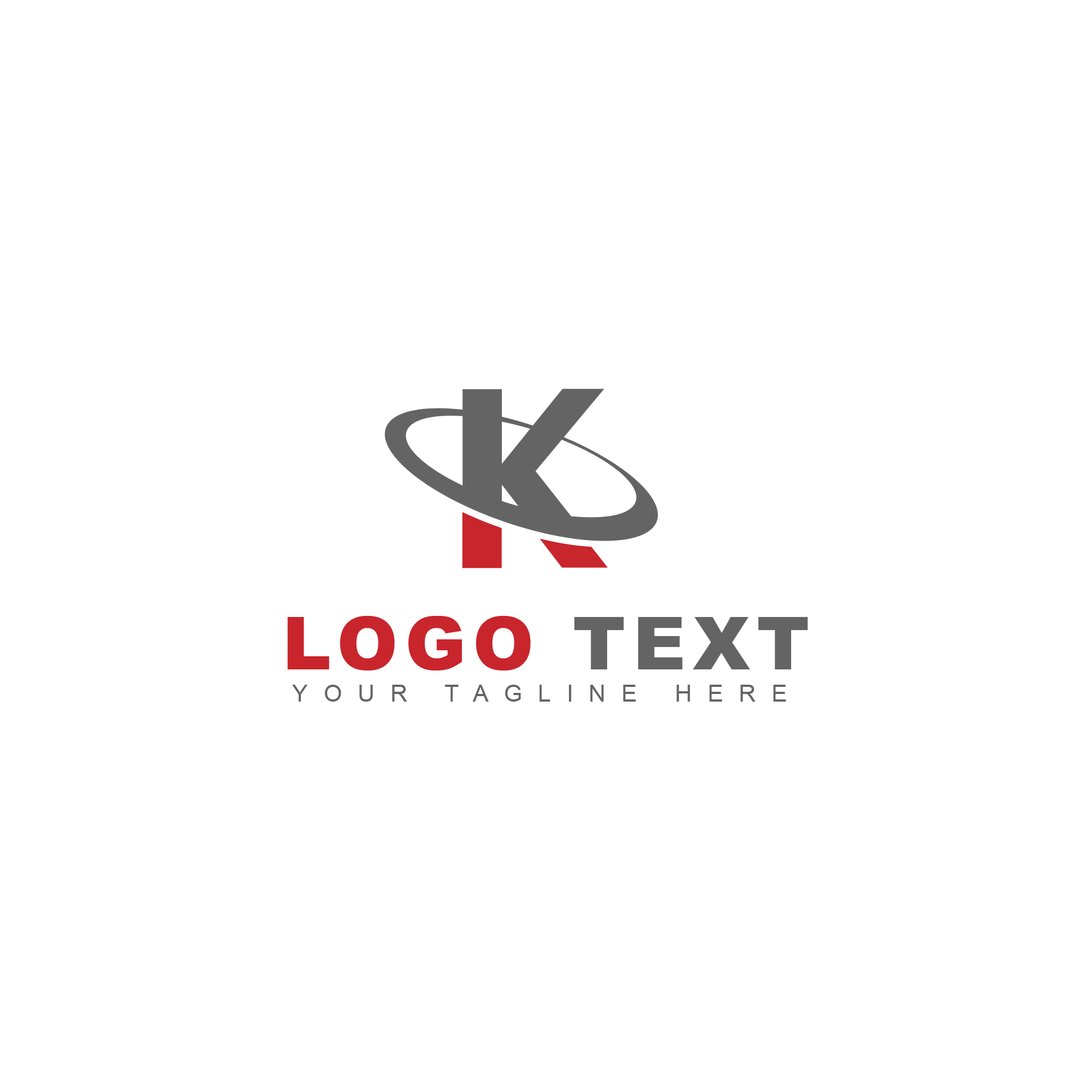
<style>
.page{position:relative;width:1092px;height:1092px;background:#ffffff}
.page>*{position:absolute;margin:0}
.t1{font:72.9px "Arial-Black";letter-spacing:0.1em;color:#c9252c}
.t2{font:72.9px "Arial-Black";letter-spacing:0.1em;color:#646464}
.t3{font:23.6px "ArialMT";letter-spacing:0.66em;color:#646464}
</style>
<div class="page">
<p class="t1" style="left:287px;top:616px;width:521px;height:54px">LOGO<span class="t2"> TEXT</span></p>
<p class="t3" style="left:292px;top:685px;width:494px;height:17px">YOUR TAGLINE HERE</p>
</div>
